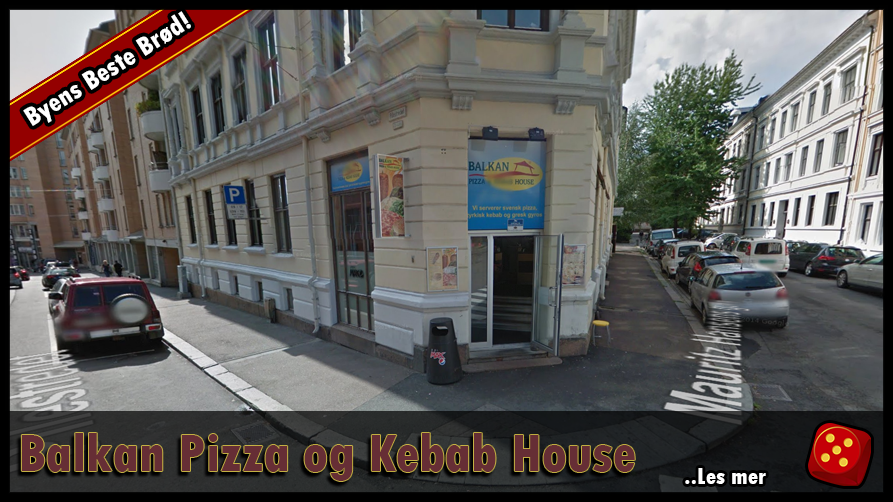
<style>
.page{position:relative;width:893px;height:502px}
.page>*{position:absolute;margin:0}
.t1{font:28px "TwCenMT-CondensedExtraBold";color:#ffffff}
.t2{font:55px "TwCenMT-CondensedExtraBold";color:#662e35}
.t3{font:24px "TwCenMT-CondensedExtraBold";color:#ffffff}
</style>
<div class="page">
<p class="t1" style="left:23px;top:11px;width:168px;height:115px;rotate:-32deg">Byens Beste Brød!</p>
<p class="t2" style="left:21px;top:433px;width:614px;height:48px">Balkan Pizza og Kebab House</p>
<p class="t3" style="left:685px;top:468px;width:81px;height:16px">..Les mer</p>
</div>
